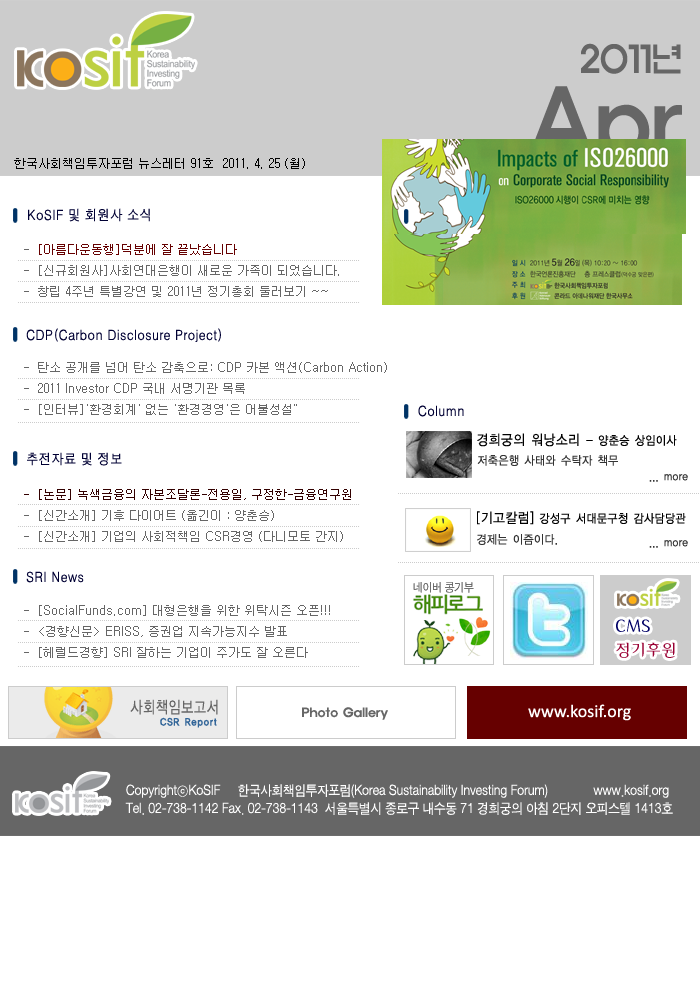
<style>
.page{position:relative;width:700px;height:1000px;background:#ffffff}
.page>*{position:absolute;margin:0}
.t1{font:36.1px/41.9px "ExpoM-HM";color:#666666;scale:0.89 1}
.t2{font:90.2px/41.9px "ExpoM-HM";color:#666666;scale:0.89 1}
.t3{font:12px "Gulim";color:#000000}
.t4{font:14px "H2gtrM";color:#000033;scale:0.9 1}
.t5{font:12px "Gulim";color:#666666}
.t6{font:12px "Gulim";color:#660000}
.t7{font:12px "YDIYGO120-KSCpc-EUC-H";letter-spacing:-0.025em;color:#000000;scale:0.9 1}
.t8{font:14px "YDIYGO120-KSCpc-EUC-H";letter-spacing:-0.025em;color:#000000;scale:0.9 1}
.t9{font:12px "YDIYGO120-KSCpc-EUC-H";letter-spacing:-0.025em;color:#333333;scale:0.9 1}
.t10{font:12px "Gulim";color:#330000}
.t11{font:17.1px/24px "Gaeul";color:#990033}
.t12{font:17.1px/24px "Gaeul";color:#000066}
.t13{font:12px "ExpoM-HM";color:#666666}
.t14{font:18px "Calibri";color:#ffffff}
.t15{font:14px/18px "SandJg";color:#ffffff;scale:0.9 1}
</style>
<div class="page">
<p class="t1" style="left:528px;top:43px;width:154px;height:134px;text-align:right">2011년<br><span class="t2">Apr</span></p>
<p class="t3" style="left:14px;top:158px;width:291px;height:11px">한국사회책임투자포럼 뉴스레터 91호  2011. 4. 25 (월)</p>
<p class="t4" style="left:28px;top:208px;width:122px;height:14px">KoSIF 및 회원사 소식</p>
<p class="t5" style="left:24px;top:244px;width:315px;height:53px">-  <span class="t6">[아름다운동행]덕분에 잘 끝났습니다<br></span>-  [신규회원사]사회연대은행이 새로운 가족이 되었습니다.<br>-  창립 4주년 특별강연 및 2011년 정기총회 둘러보기 ~~</p>
<p class="t4" style="left:26px;top:328px;width:195px;height:14px">CDP(Carbon Disclosure Project)</p>
<p class="t5" style="left:24px;top:362px;width:363px;height:53px">-  탄소 공개를 넘어 탄소 감축으로: CDP 카본 액션(Carbon Action) <br>-  2011 Investor CDP 국내 서명기관 목록<br>-  [인터뷰]'환경회계' 없는 '환경경영'은 어불성설"</p>
<p class="t4" style="left:418px;top:405px;width:46px;height:12px">Column</p>
<p class="t7" style="left:477px;top:433px;width:200px;height:14px"><span class="t8">경희궁의 워낭소리 </span>- 양춘승 상임이사</p>
<p class="t4" style="left:27px;top:452px;width:95px;height:14px">추전자료 및 정보</p>
<p class="t9" style="left:477px;top:455px;width:141px;height:11px">저축은행 사태와 수탁자 책무</p>
<p class="t9" style="left:649px;top:474px;width:39px;height:8px">... more</p>
<p class="t5" style="left:24px;top:489px;width:327px;height:53px"><span class="t10">-  [논문] 녹색금융의 자본조달론-전용일, 구정한-금융연구원<br></span>-  [신간소개] 기후 다이어트 (옮긴이 : 양춘승)   <br>-  [신간소개] 기업의 사회적책임 CSR경영 (다니모토 간지)</p>
<p class="t7" style="left:477px;top:511px;width:209px;height:14px"><span class="t8">[기고칼럼]</span> 강성구 서대문구청 감사담당관</p>
<p class="t9" style="left:477px;top:534px;width:80px;height:11px">경제는 이즘이다.</p>
<p class="t9" style="left:649px;top:540px;width:39px;height:8px">... more</p>
<p class="t4" style="left:26px;top:571px;width:58px;height:12px">SRI News</p>
<p class="t5" style="left:24px;top:605px;width:306px;height:53px">-  [SocialFunds.com] 대형은행을 위한 위탁시즌 오픈!!!<br>-  &lt;경향신문&gt; ERISS, 증권업 지속가능지수 발표 <br>-  [헤럴드경향] SRI 잘하는 기업이 주가도 잘 오른다</p>
<p class="t11" style="left:616px;top:619px;width:59px;height:39px"><span class="t12">CMS <br></span>정기후원</p>
<p class="t13" style="left:302px;top:707px;width:86px;height:13px">Photo Gallery</p>
<p class="t14" style="left:528px;top:704px;width:103px;height:17px">www.kosif.org</p>
<p class="t15" style="left:125px;top:784px;width:548px;height:31px">CopyrightⓒKoSIF     한국사회책임투자포럼(Korea Sustainability Investing Forum)             www.kosif.org <br>Tel. 02-738-1142 Fax. 02-738-1143  서울특별시 종로구 내수동 71 경희궁의 아침 2단지 오피스텔 1413호</p>
</div>
